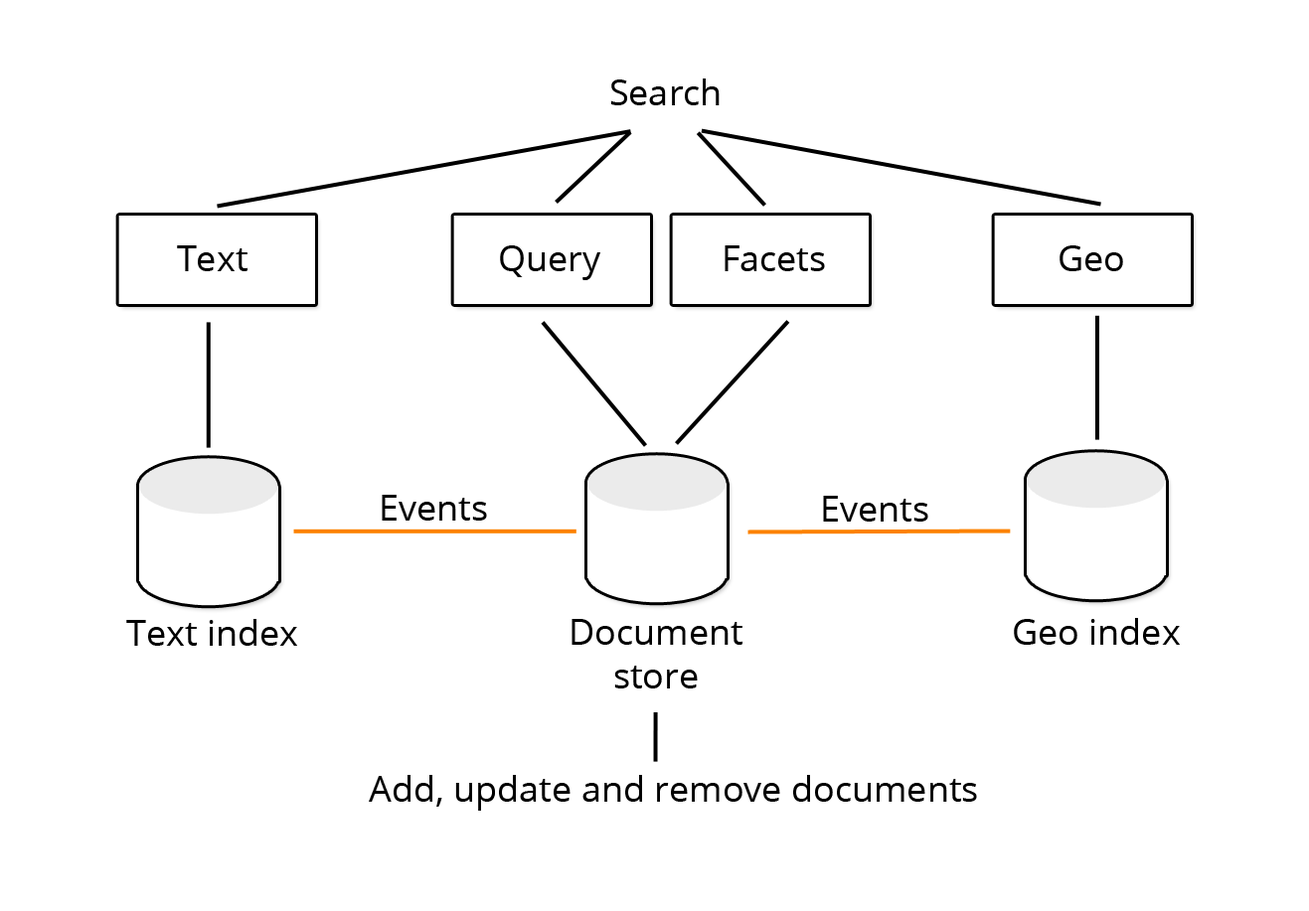
<style>
.page{position:relative;width:1309px;height:911px;background:#ffffff}
.page>*{position:absolute;margin:0}
.t1{font:35.8px "OpenSans";color:#000000}
</style>
<div class="page">
<p class="t1" style="left:610px;top:78px;width:109px;height:27px">Search</p>
<p class="t1" style="left:177px;top:245px;width:70px;height:26px">Text</p>
<p class="t1" style="left:500px;top:245px;width:100px;height:35px">Query</p>
<p class="t1" style="left:724px;top:245px;width:101px;height:26px">Facets</p>
<p class="t1" style="left:1059px;top:245px;width:64px;height:26px">Geo</p>
<p class="t1" style="left:382px;top:495px;width:105px;height:26px">Events</p>
<p class="t1" style="left:823px;top:496px;width:105px;height:26px">Events</p>
<p class="t1" style="left:126px;top:619px;width:171px;height:27px">Text index</p>
<p class="t1" style="left:571px;top:619px;width:171px;height:70px;text-align:center">Document<br>store</p>
<p class="t1" style="left:1014px;top:618px;width:165px;height:27px">Geo index</p>
<p class="t1" style="left:369px;top:775px;width:608px;height:36px">Add, update and remove documents</p>
</div>
